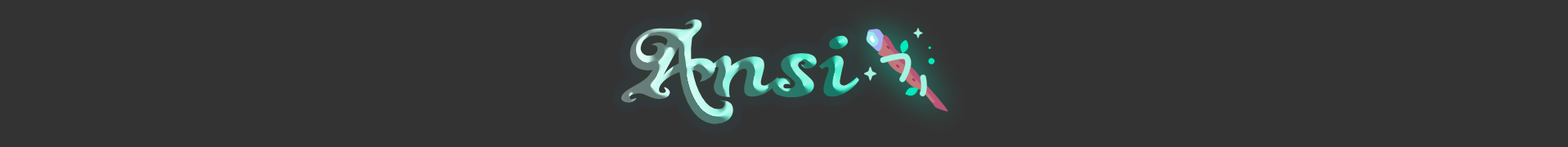
<style>
.page{position:relative;width:1568px;height:147px;background:#333333}
.page>*{position:absolute;margin:0}
.t1{font:108.8px "BlackRose";scale:1.2 1}
</style>
<div class="page">
<p class="t1" style="left:620px;top:19px;width:240px;height:105px">Ansi</p>
</div>
